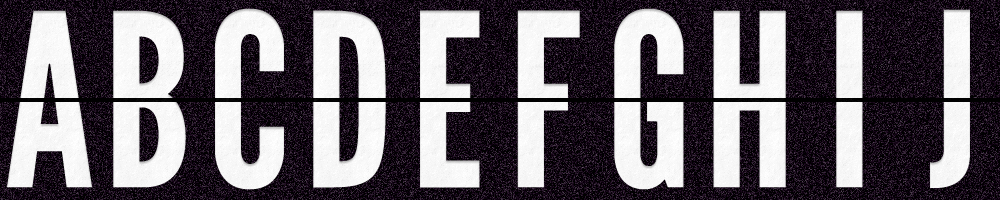
<style>
.page{position:relative;width:1000px;height:200px}
.page>*{position:absolute;margin:0}
.t1{font:240px "LeagueGothic";color:#f8f8f8}
.t2{font:240px "LeagueGothic";color:#f7f7f7}
</style>
<div class="page">
<p class="t1" style="left:7px;top:10px;width:85px;height:178px">A</p>
<p class="t1" style="left:113px;top:10px;width:73px;height:178px">B</p>
<p class="t1" style="left:215px;top:8px;width:69px;height:182px">C</p>
<p class="t1" style="left:313px;top:10px;width:73px;height:178px">D</p>
<p class="t1" style="left:420px;top:10px;width:60px;height:178px">E</p>
<p class="t1" style="left:517px;top:10px;width:63px;height:178px">F</p>
<p class="t1" style="left:614px;top:8px;width:70px;height:182px">G</p>
<p class="t1" style="left:713px;top:10px;width:73px;height:178px">H</p>
<p class="t2" style="left:836px;top:10px;width:27px;height:178px">I</p>
<p class="t2" style="left:930px;top:9px;width:40px;height:179px">J</p>
</div>
